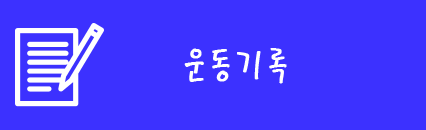
<style>
.page{position:relative;width:426px;height:130px;background:#3c31ff}
.page>*{position:absolute;margin:0}
.t1{font:37px "PyunjiR-HM";color:#ffffff;font-weight:bold;scale:0.97 1}
</style>
<div class="page">
<p class="t1" style="left:184px;top:48px;width:103px;height:36px">운동기록</p>
</div>
